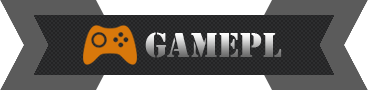
<style>
.page{position:relative;width:368px;height:90px;background:#5b5b5b}
.page>*{position:absolute;margin:0}
.t1{font:36px "Stencil"}
</style>
<div class="page">
<p class="t1" style="left:145px;top:32px;width:137px;height:26px">GamePL</p>
</div>
